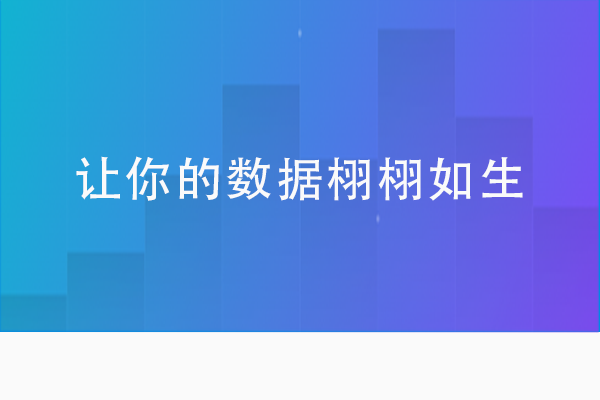
<style>
.page{position:relative;width:600px;height:400px}
.page>*{position:absolute;margin:0}
.t1{font:48px "AdobeHeitiStd-Regular";letter-spacing:0.052em;color:#fafafa}
</style>
<div class="page">
<p class="t1" style="left:76px;top:156px;width:447px;height:45px">让你的数据栩栩如生</p>
</div>
